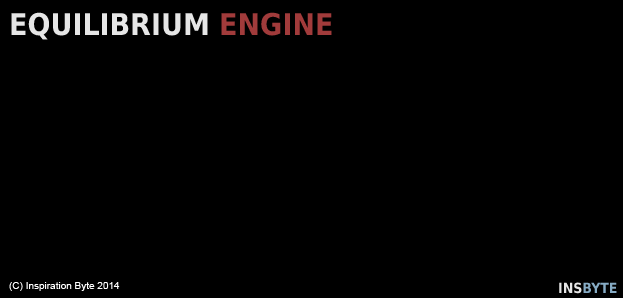
<style>
.page{position:relative;width:623px;height:298px;background:#000000}
.page>*{position:absolute;margin:0}
.t1{font:30px "DejaVuSansCondensed-Bold";color:#e6e6e6}
.t2{font:30px "DejaVuSansCondensed-Bold";color:#a13b3b}
.t3{font:10px "ArialMT";color:#ffffff}
.t4{font:14px "DejaVuSansCondensed-Bold";color:#86abc4}
.t5{font:14px "DejaVuSansCondensed-Bold";color:#e6e6e6}
</style>
<div class="page">
<p class="t1" style="left:11px;top:12px;width:321px;height:28px">EQUILIBRIUM <span class="t2">ENGINE</span></p>
<p class="t3" style="left:9px;top:282px;width:111px;height:9px">(C) Inspiration Byte 2014</p>
<p class="t4" style="left:559px;top:282px;width:58px;height:12px"><span class="t5">INS</span>BYTE</p>
</div>
